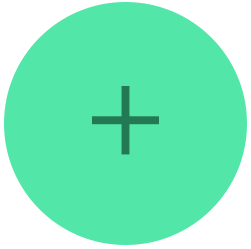
<style>
.page{position:relative;width:251px;height:249px;background:#52e6a8}
.page>*{position:absolute;margin:0}
.t1{font:114.3px "BankGothicBT-Medium";color:#247955}
</style>
<div class="page">
<p class="t1" style="left:92px;top:86px;width:67px;height:69px">+</p>
</div>
